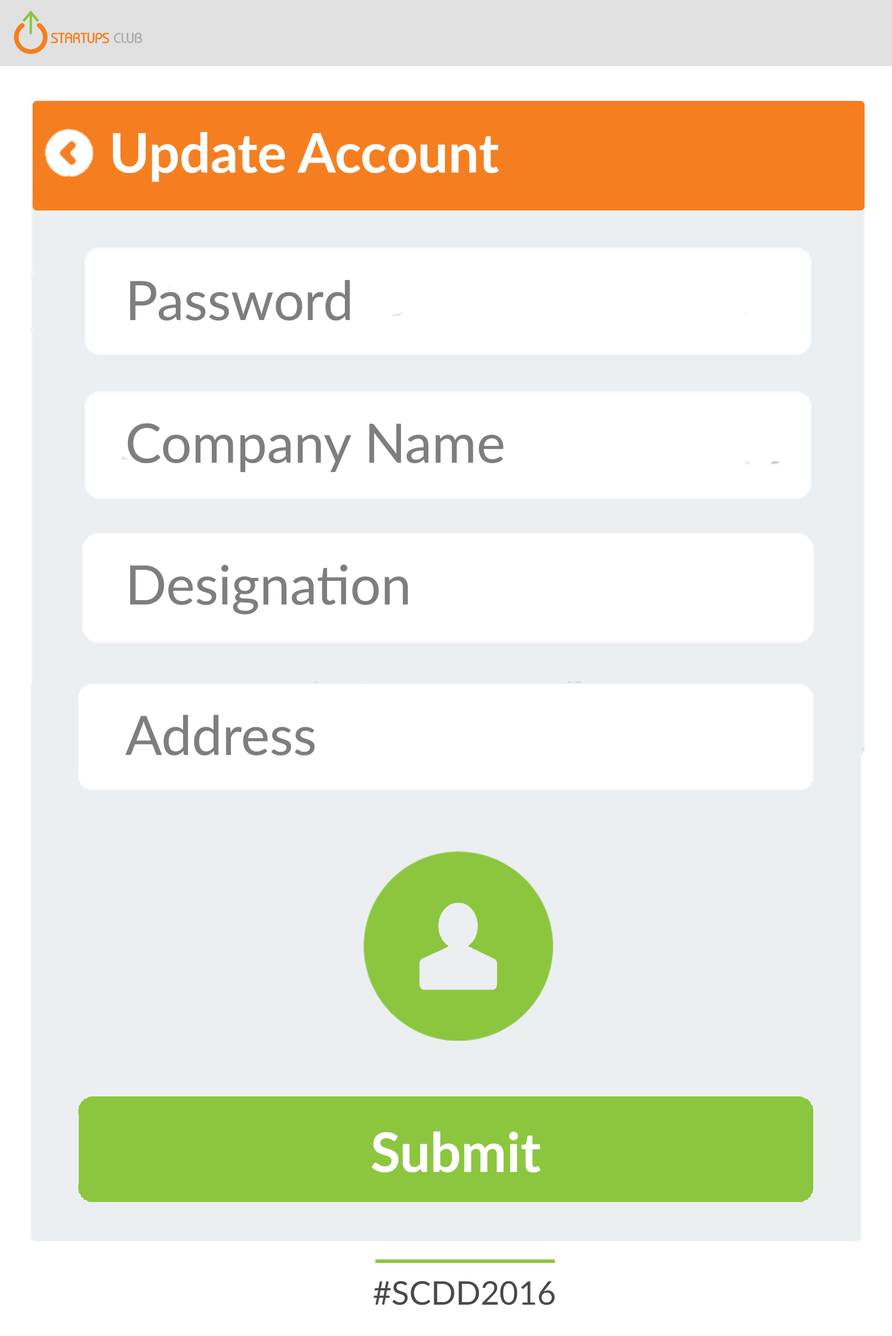
<style>
.page{position:relative;width:892px;height:1336px;background:#ffffff}
.page>*{position:absolute;margin:0}
.t1{font:54.4px "Lato-Bold";color:#ffffff}
.t2{font:54.4px "Lato-Regular";color:#7f7e7e}
.t3{font:32.6px "Lato-Regular";color:#4a4b49}
</style>
<div class="page">
<p class="t1" style="left:113px;top:132px;width:386px;height:50px">Update Account</p>
<p class="t2" style="left:130px;top:280px;width:220px;height:41px">Password</p>
<p class="t2" style="left:127px;top:423px;width:377px;height:49px">Company Name</p>
<p class="t2" style="left:130px;top:565px;width:278px;height:50px">Designation</p>
<p class="t2" style="left:125px;top:715px;width:190px;height:41px">Address</p>
<p class="t1" style="left:372px;top:1132px;width:169px;height:41px">Submit</p>
<p class="t3" style="left:374px;top:1281px;width:181px;height:25px">#SCDD2016</p>
</div>
